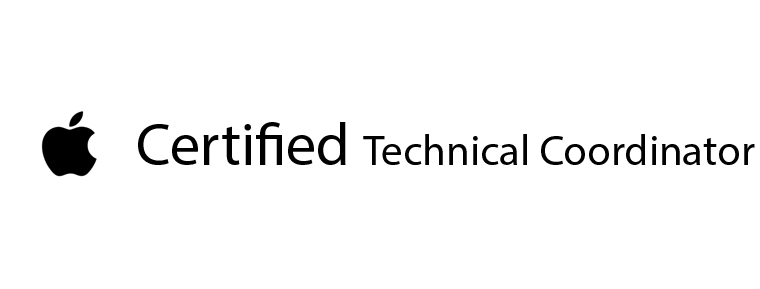
<style>
.page{position:relative;width:760px;height:289px;background:#ffffff}
.page>*{position:absolute;margin:0}
.t1{font:43px "MyriadPro-Regular";color:#000000}
.t2{font:60px "MyriadPro-Regular";color:#000000}
</style>
<div class="page">
<p class="t1" style="left:138px;top:122px;width:617px;height:43px"><span class="t2">Certified </span>Technical Coordinator</p>
</div>
